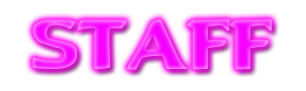
<style>
.page{position:relative;width:306px;height:91px;background:#ffffff}
.page>*{position:absolute;margin:0}
.t1{font:60px "Aegis";letter-spacing:-0.05em}
</style>
<div class="page">
<p class="t1" style="left:32px;top:19px;width:240px;height:51px">stAff</p>
</div>
